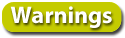
<style>
.page{position:relative;width:125px;height:38px;background:#c4cb00}
.page>*{position:absolute;margin:0}
.t1{font:24px "MyriadPro-Bold";color:#ffffff}
</style>
<div class="page">
<p class="t1" style="left:10px;top:6px;width:102px;height:22px">Warnings</p>
</div>
